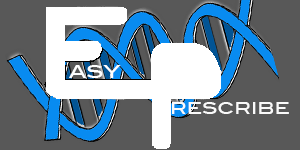
<style>
.page{position:relative;width:300px;height:150px;background:#585858}
.page>*{position:absolute;margin:0}
.t1{font:20.8px "BlairMdITCTTMedium";color:#ffffff}
.t2{font:18.8px "BlairMdITCTTMedium";color:#fafafa}
</style>
<div class="page">
<p class="t1" style="left:69px;top:65px;width:52px;height:13px">asy</p>
<p class="t2" style="left:172px;top:102px;width:117px;height:12px">rescribe</p>
</div>
